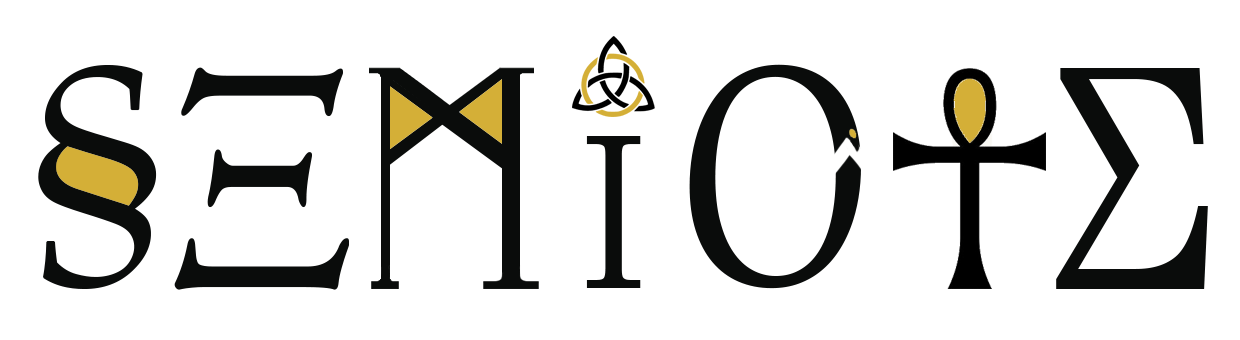
<style>
.page{position:relative;width:1240px;height:340px;background:#ffffff}
.page>*{position:absolute;margin:0}
.t1{font:242.2px "PalatinoLinotype-Roman";color:#0a0c0b;scale:1.11 1}
.t2{font:324.7px "EBGaramond08-Regular";color:#0a0c0b;scale:0.92 1}
.t3{font:305.6px "CenturySchoolbook";color:#0a0c0b;scale:0.93 1}
.t4{font:211.3px "CenturySchoolbook";color:#0a0c0b;scale:0.76 1}
</style>
<div class="page">
<p class="t1" style="left:38px;top:65px;width:119px;height:224px">§</p>
<p class="t2" style="left:174px;top:67px;width:175px;height:223px">Ξ</p>
<p class="t3" style="left:1056px;top:68px;width:152px;height:221px">Σ</p>
<p class="t4" style="left:586px;top:136px;width:55px;height:152px">I</p>
</div>
